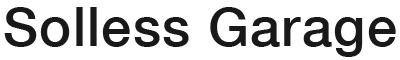
<style>
.page{position:relative;width:400px;height:60px;background:#ffffff}
.page>*{position:absolute;margin:0}
.t1{font:54px "HelveticaNeue-Medium";letter-spacing:0.025em;color:#191919}
</style>
<div class="page">
<p class="t1" style="left:4px;top:7px;width:392px;height:50px">Solless Garage</p>
</div>
